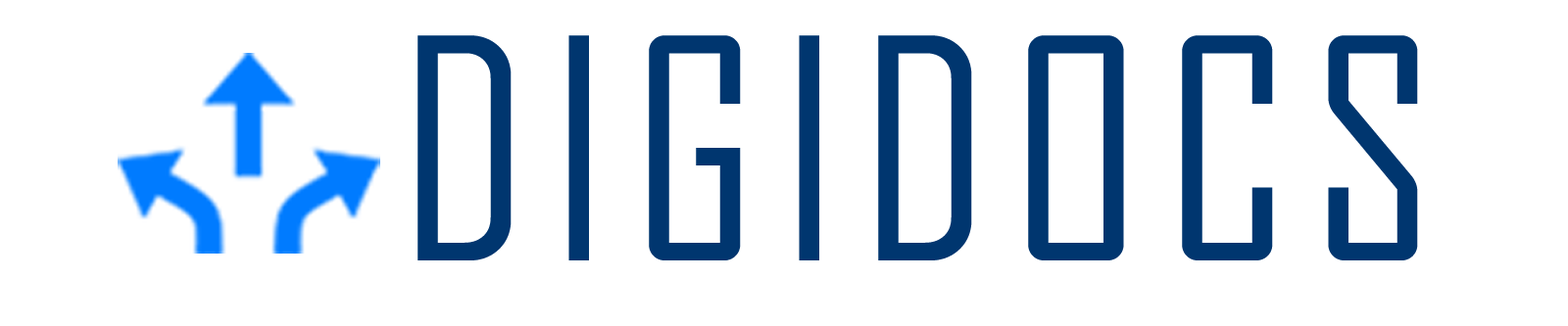
<style>
.page{position:relative;width:1568px;height:326px;background:#ffffff}
.page>*{position:absolute;margin:0}
.t1{font:294.6px "AgencyFB-Reg";letter-spacing:0.075em;color:#00366f;text-transform:uppercase}
</style>
<div class="page">
<p class="t1" style="left:417px;top:35px;width:1001px;height:226px">DigiDocs</p>
</div>
